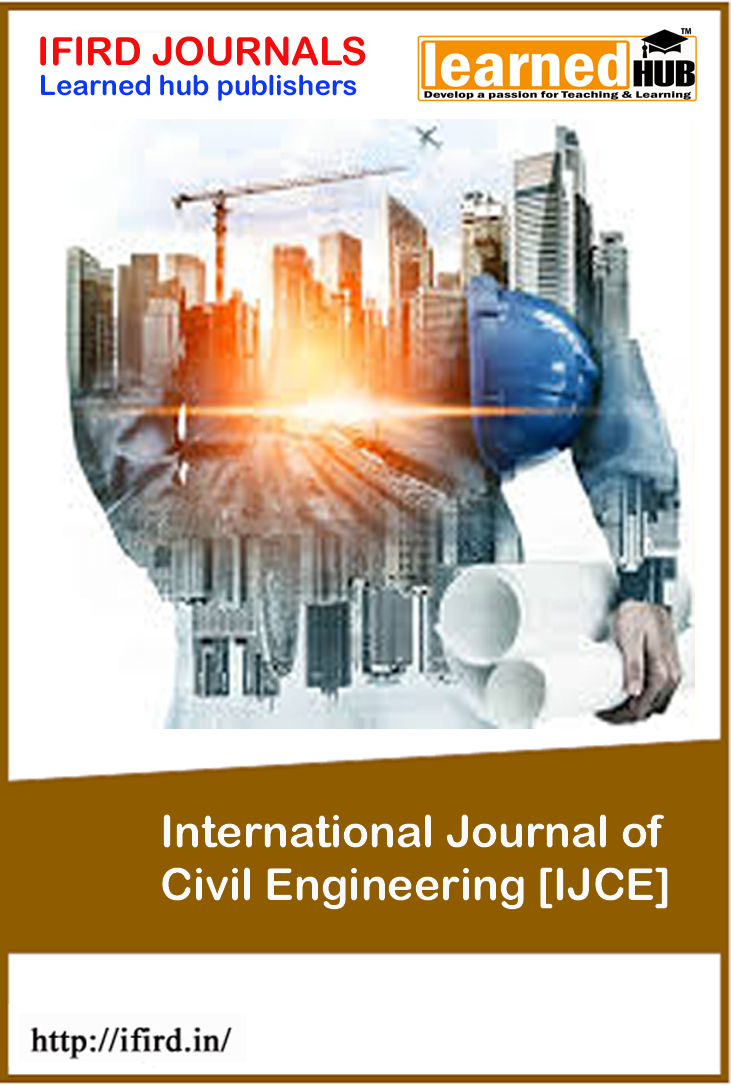
<style>
.page{position:relative;width:731px;height:1085px;background:#ffffff}
.page>*{position:absolute;margin:0}
.t1{font:38.9px "ArialRoundedMTBold";color:#f60b0b}
.t2{font:27.8px "ArialRoundedMTBold";color:#0b37f6}
.t3{font:44.4px "ArialRoundedMTBold";color:#fafafc}
</style>
<div class="page">
<p class="t1" style="left:40px;top:36px;width:326px;height:30px">IFIRD JOURNALS</p>
<p class="t2" style="left:41px;top:74px;width:316px;height:27px">Learned hub publishers</p>
<p class="t3" style="left:162px;top:814px;width:506px;height:96px">International Journal of <br>Civil Engineering [IJCE]</p>
</div>
